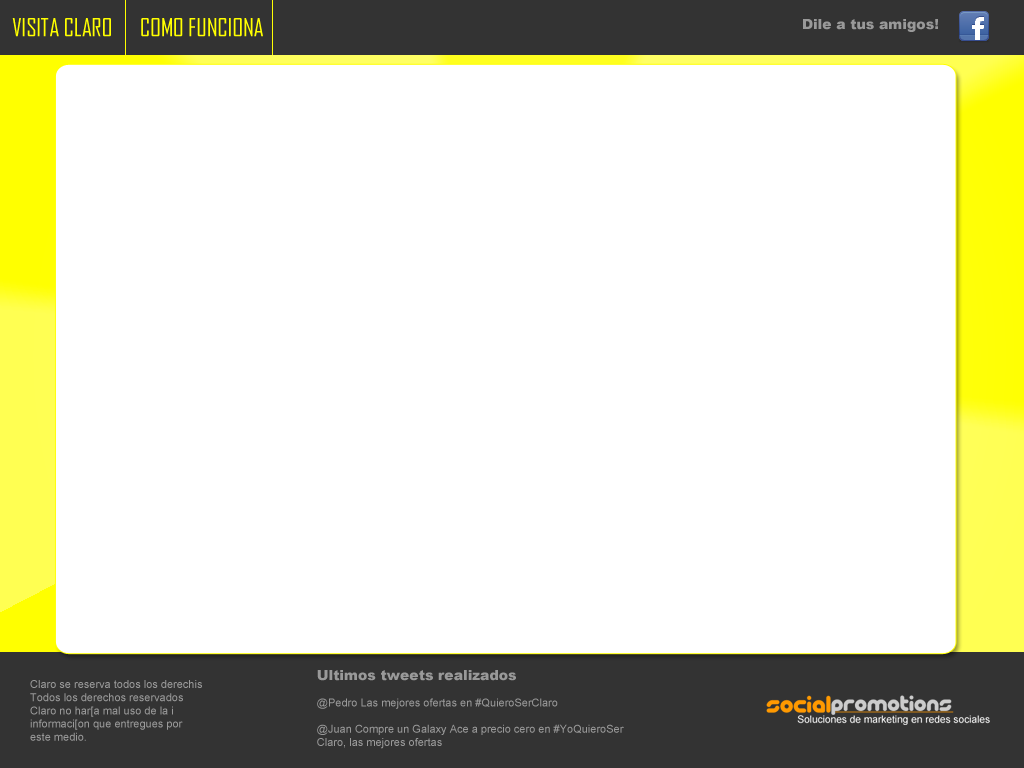
<style>
.page{position:relative;width:1024px;height:768px;background:#ffffff}
.page>*{position:absolute;margin:0}
.t1{font:24px "AgencyFB-Reg";color:#ffff00}
.t2{font:14px "Arial-Black";color:#999999}
.t3{font:11px "ArialMT";color:#999999}
</style>
<div class="page">
<p class="t1" style="left:12px;top:18px;width:99px;height:19px">VISITA CLARO</p>
<p class="t1" style="left:141px;top:18px;width:122px;height:19px">COMO FUNCIONA</p>
<p class="t2" style="left:803px;top:19px;width:135px;height:13px">Dile a tus amigos!</p>
<p class="t3" style="left:317px;top:670px;width:307px;height:79px"><span class="t2">Ultimos tweets realizados<br></span><br>@Pedro Las mejores ofertas en #QuieroSerClaro<br><br>@Juan Compre un Galaxy Ace a precio cero en #YoQuieroSer<br>Claro, las mejores ofertas</p>
<p class="t3" style="left:30px;top:680px;width:172px;height:61px">Claro se reserva todos los derechis<br>Todos los derechos reservados<br>Claro no har[a mal uso de la i<br>informaci[on que entregues por<br>este medio.</p>
</div>
